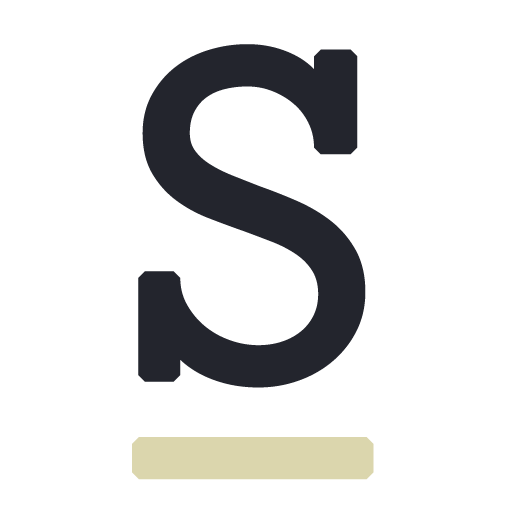
<style>
.page{position:relative;width:512px;height:512px;background:#ffffff}
.page>*{position:absolute;margin:0}
.t1{font:500px/30px "AnonymousPro";letter-spacing:0.075em;color:#23252d;font-weight:bold}
.t2{font:500px/200px "AnonymousPro";letter-spacing:0.075em;color:#dbd6ad;font-weight:bold}
</style>
<div class="page">
<p class="t1" style="left:132px;top:44px;width:242px;height:436px">S<br><span class="t2">-</span></p>
</div>
